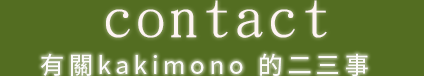
<style>
.page{position:relative;width:424px;height:76px;background:#536d21}
.page>*{position:absolute;margin:0}
.t1{font:55px "DFKaiShu-SB-Estd-BF";letter-spacing:0.1em;color:#fef4f2}
.t2{font:24px "NotoSansCJKtc-Regular";letter-spacing:0.2em;color:#fcfbfa}
</style>
<div class="page">
<p class="t1" style="left:106px;top:0px;width:221px;height:38px">contact</p>
<p class="t2" style="left:41px;top:53px;width:327px;height:24px">有關kakimono 的二三事</p>
</div>
